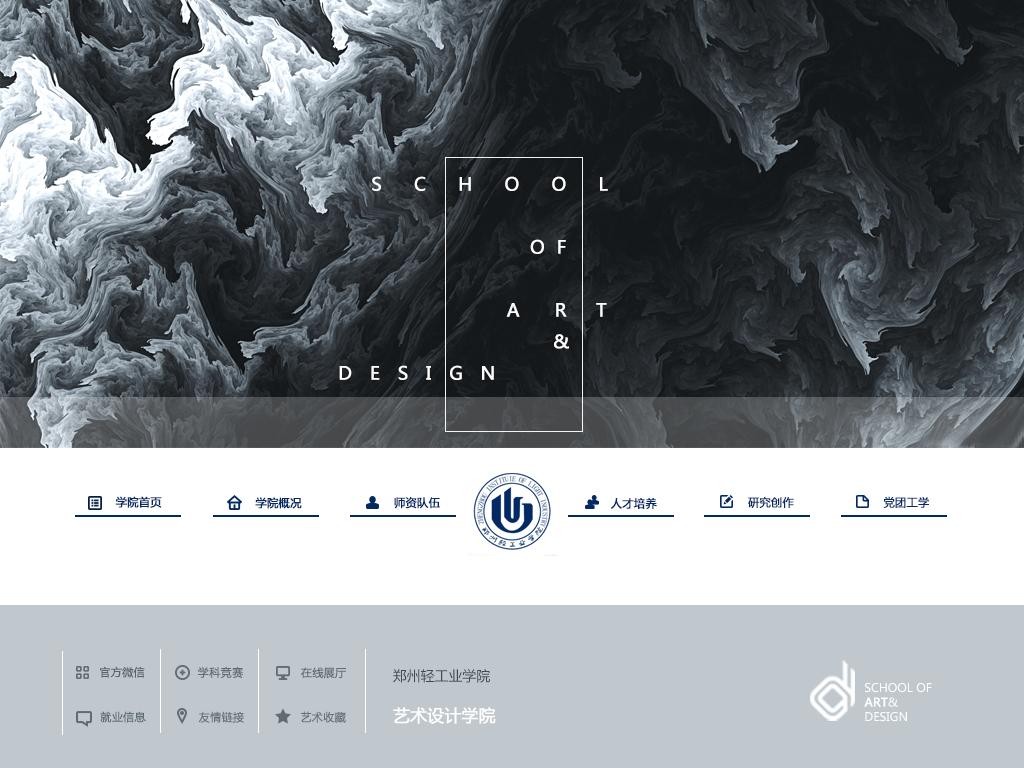
<style>
.page{position:relative;width:1024px;height:768px;background:#c0c8cd}
.page>*{position:absolute;margin:0}
.t1{font:18px "MicrosoftYaHei";color:#ffffff;font-weight:bold}
.t2{font:18px "MicrosoftYaHei";letter-spacing:0.2em;color:#ffffff;font-weight:bold}
.t3{font:11.2px "MicrosoftYaHei";color:#022964;font-weight:bold}
.t4{font:11.1px "MicrosoftYaHei";color:#59636a;font-weight:bold}
.t5{font:11.1px "MicrosoftYaHei";color:#606b73;font-weight:bold}
.t6{font:11.6px/14.5px "MicrosoftYaHei";color:#ffffff}
.t7{font:11.6px/14.5px "MicrosoftYaHei";color:#ffffff;font-weight:bold}
.t8{font:11.1px "MicrosoftYaHei";color:#697277;font-weight:bold}
</style>
<div class="page">
<p class="t1" style="left:339px;top:176px;width:269px;height:204px"><span class="t2">              S   C   H   O   O   L <br></span><br>                                                  O  F  <br>                            <br>                                              A      R     T       <br>                                                      &amp;    <br>                 D   E   S   I   G   N</p>
<p class="t3" style="left:115px;top:496px;width:47px;height:12px">学院首页</p>
<p class="t3" style="left:255px;top:497px;width:47px;height:12px">学院概况</p>
<p class="t3" style="left:394px;top:497px;width:46px;height:12px">师资队伍</p>
<p class="t3" style="left:748px;top:496px;width:46px;height:12px">研究创作</p>
<p class="t3" style="left:883px;top:496px;width:46px;height:12px">党团工学</p>
<p class="t3" style="left:610px;top:498px;width:47px;height:11px">人才培养</p>
<p class="t4" style="left:100px;top:666px;width:45px;height:12px">官方微信</p>
<p class="t5" style="left:198px;top:666px;width:45px;height:12px">学科竞赛</p>
<p class="t5" style="left:301px;top:667px;width:45px;height:12px">在线展厅</p>
<p class="t6" style="left:864px;top:683px;width:68px;height:39px">SCHOOL OF<br><span class="t7">ART</span>&amp;<br>DESIGN</p>
<p class="t5" style="left:100px;top:711px;width:46px;height:12px">就业信息</p>
<p class="t8" style="left:198px;top:711px;width:46px;height:12px">友情链接</p>
<p class="t8" style="left:300px;top:711px;width:46px;height:12px">艺术收藏</p>
</div>
